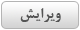
<style>
.page{position:relative;width:80px;height:30px}
.page>*{position:absolute;margin:0}
.t1{font:16px "BNazaninBold";color:#555555}
</style>
<div class="page">
<p class="t1" style="left:20px;top:8px;width:41px;height:14px">ویرایش</p>
</div>
